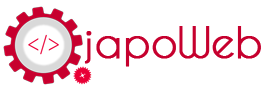
<style>
.page{position:relative;width:270px;height:93px;background:#ffffff}
.page>*{position:absolute;margin:0}
.t1{font:41px "CaviarDreams";color:#c6002e;font-weight:bold}
</style>
<div class="page">
<p class="t1" style="left:84px;top:26px;width:177px;height:41px">japoWeb</p>
</div>
